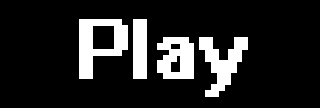
<style>
.page{position:relative;width:320px;height:108px;background:#000000}
.page>*{position:absolute;margin:0}
.t1{font:75px "System";letter-spacing:0.01em;color:#ffffff;font-weight:bold}
</style>
<div class="page">
<p class="t1" style="left:79px;top:19px;width:169px;height:78px">Play</p>
</div>
